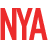
<style>
.page{position:relative;width:48px;height:48px;background:#ffffff}
.page>*{position:absolute;margin:0}
.t1{font:48px "FetteEngschrift";letter-spacing:-0.075em;color:#ec2b2b}
.t2{font:48px "FetteEngschrift";letter-spacing:-0.065em;color:#ec2b2b}
</style>
<div class="page">
<p class="t1" style="left:0px;top:8px;width:48px;height:32px"><span class="t2">N</span>YA</p>
</div>
